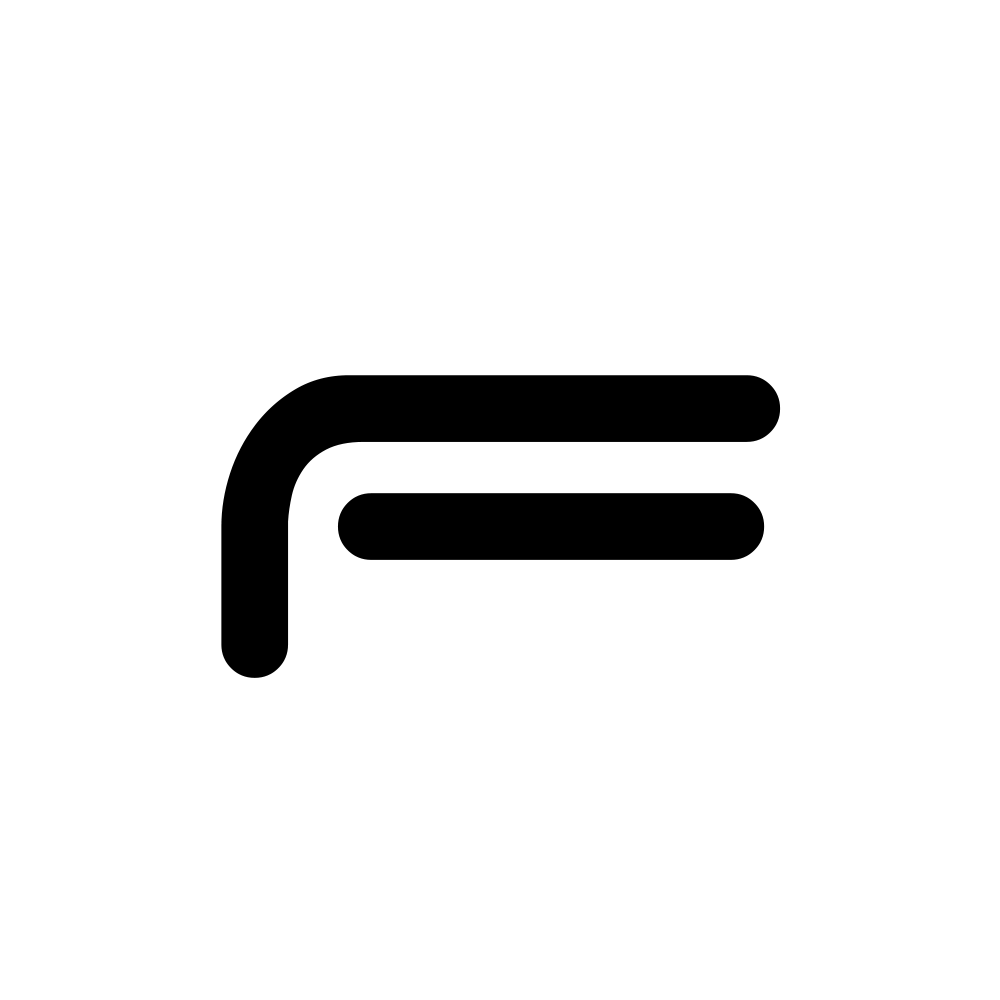
<style>
.page{position:relative;width:1000px;height:1000px;background:#ffffff}
.page>*{position:absolute;margin:0}
.t1{font:694.4px "SpaceAge";color:#000000}
</style>
<div class="page">
<p class="t1" style="left:221px;top:375px;width:560px;height:303px">F</p>
</div>
